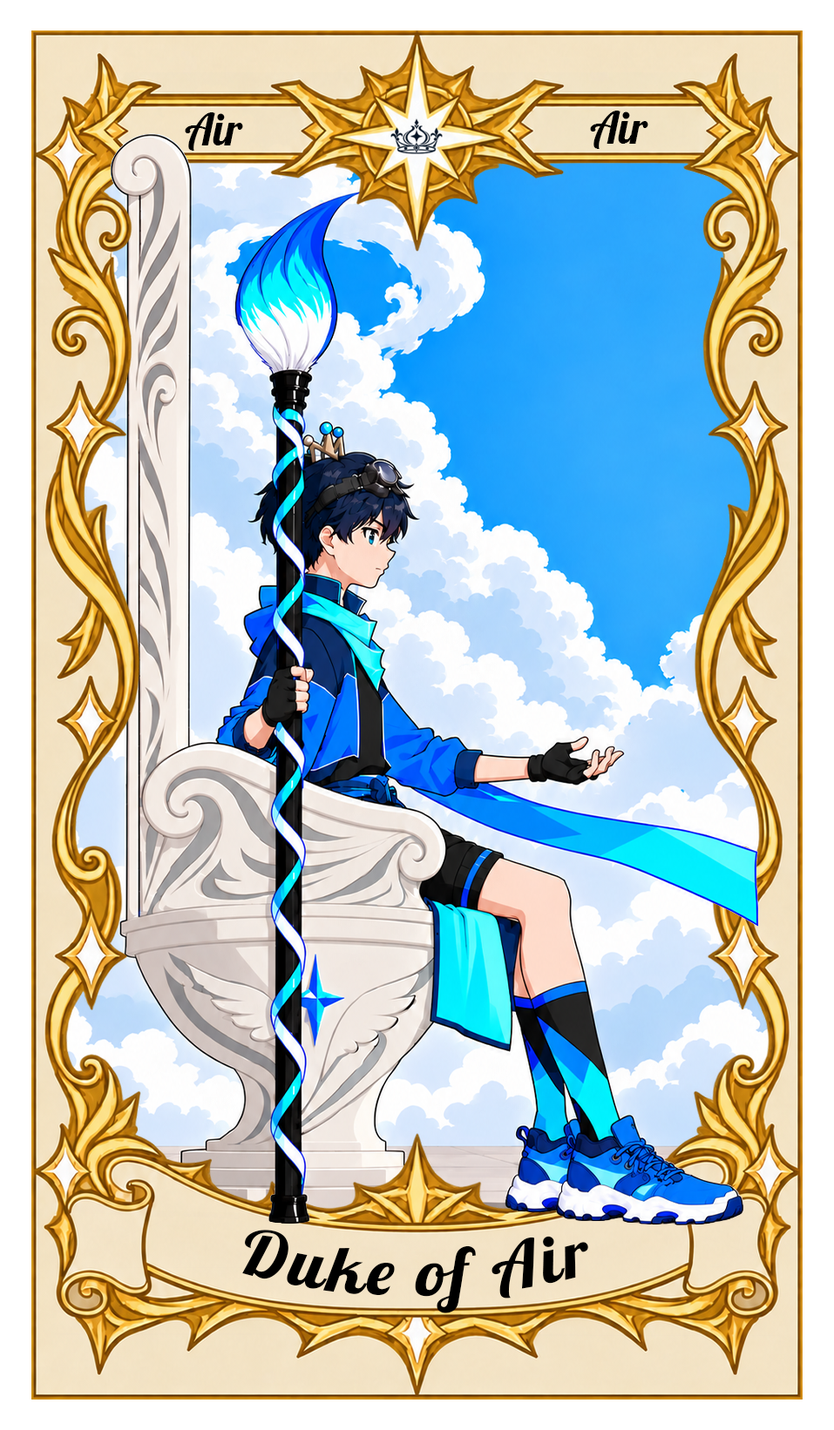
<style>
.page{position:relative;width:834px;height:1430px}
.page>*{position:absolute;margin:0}
.t1{font:43.6px "Lobster-Regular";color:#000000}
.t2{font:65.3px "Lobster-Regular";letter-spacing:0.05em;color:#000000}
</style>
<div class="page">
<p class="t1" style="left:185px;top:112px;width:58px;height:39px">Air</p>
<p class="t1" style="left:590px;top:111px;width:58px;height:38px">Air</p>
<p class="t2" style="left:242px;top:1230px;width:346px;height:84px">Duke of Air</p>
</div>
